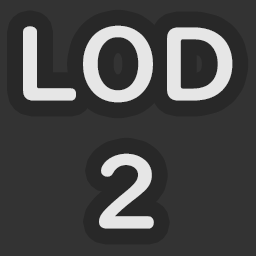
<style>
.page{position:relative;width:256px;height:256px;background:#333333}
.page>*{position:absolute;margin:0}
.t1{font:100px/128px "UDDigiKyokashoNK-B";color:#e6e6e6}
</style>
<div class="page">
<p class="t1" style="left:23px;top:25px;width:210px;height:204px;text-align:center">LOD<br>2</p>
</div>
